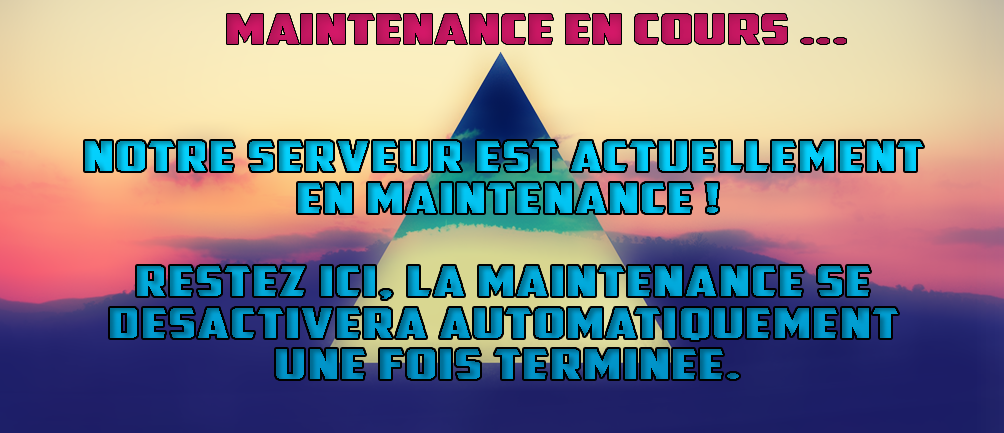
<style>
.page{position:relative;width:1004px;height:433px}
.page>*{position:absolute;margin:0}
.t1{font:40.8px "AmericanCaptain";color:#bf165e;scale:1.88 1}
.t2{font:41.6px/41.6px "AmericanCaptain";letter-spacing:0.02em;scale:1.75 1}
</style>
<div class="page">
<p class="t1" style="left:227px;top:14px;width:619px;height:30px">Maintenance en cours ...</p>
<p class="t2" style="left:85px;top:141px;width:838px;height:238px;text-align:center">notre serveur est actuellement <br>en maintenance !<br><br>restez ici, la maintenance se <br>desactivera automatiquement <br>une fois terminee.</p>
</div>
